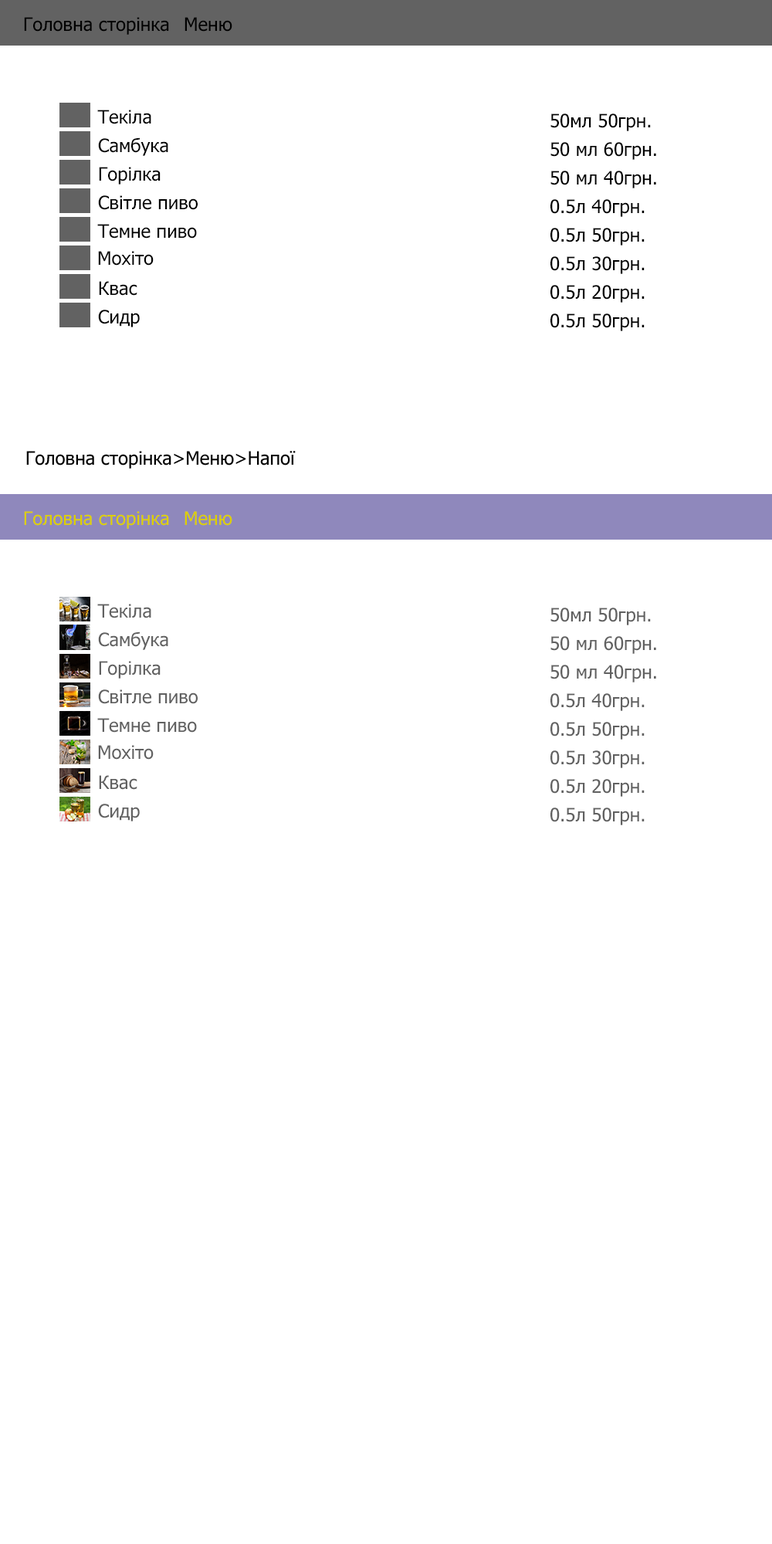
<style>
.page{position:relative;width:772px;height:1544px;background:#ffffff}
.page>*{position:absolute;margin:0}
.t1{font:18.5px "Tahoma";color:#000000}
.t2{font:18.5px "Tahoma";color:#ddcf00}
.t3{font:18.5px "Tahoma";color:#616161}
</style>
<div class="page">
<p class="t1" style="left:24px;top:17px;width:145px;height:18px">Головна сторінка</p>
<p class="t1" style="left:185px;top:17px;width:47px;height:15px">Меню</p>
<p class="t1" style="left:97px;top:110px;width:54px;height:14px">Текіла</p>
<p class="t1" style="left:551px;top:114px;width:100px;height:17px">50мл 50грн.</p>
<p class="t1" style="left:98px;top:137px;width:70px;height:19px">Самбука</p>
<p class="t1" style="left:551px;top:142px;width:105px;height:18px">50 мл 60грн.</p>
<p class="t1" style="left:99px;top:167px;width:62px;height:18px">Горілка</p>
<p class="t1" style="left:551px;top:171px;width:105px;height:17px">50 мл 40грн.</p>
<p class="t1" style="left:98px;top:195px;width:100px;height:15px">Світле пиво</p>
<p class="t1" style="left:551px;top:199px;width:94px;height:18px">0.5л 40грн.</p>
<p class="t1" style="left:97px;top:224px;width:100px;height:15px">Темне пиво</p>
<p class="t1" style="left:551px;top:228px;width:94px;height:18px">0.5л 50грн.</p>
<p class="t1" style="left:98px;top:251px;width:56px;height:15px">Мохіто</p>
<p class="t1" style="left:551px;top:256px;width:94px;height:18px">0.5л 30грн.</p>
<p class="t1" style="left:99px;top:281px;width:38px;height:15px">Квас</p>
<p class="t1" style="left:551px;top:285px;width:94px;height:18px">0.5л 20грн.</p>
<p class="t1" style="left:98px;top:310px;width:42px;height:17px">Сидр</p>
<p class="t1" style="left:551px;top:313px;width:94px;height:18px">0.5л 50грн.</p>
<p class="t2" style="left:24px;top:511px;width:145px;height:18px">Головна сторінка</p>
<p class="t2" style="left:185px;top:511px;width:47px;height:15px">Меню</p>
<p class="t3" style="left:97px;top:604px;width:54px;height:14px">Текіла</p>
<p class="t3" style="left:551px;top:608px;width:100px;height:17px">50мл 50грн.</p>
<p class="t3" style="left:98px;top:632px;width:70px;height:18px">Самбука</p>
<p class="t3" style="left:551px;top:636px;width:105px;height:18px">50 мл 60грн.</p>
<p class="t3" style="left:99px;top:661px;width:62px;height:18px">Горілка</p>
<p class="t3" style="left:551px;top:665px;width:105px;height:18px">50 мл 40грн.</p>
<p class="t3" style="left:98px;top:690px;width:100px;height:14px">Світле пиво</p>
<p class="t3" style="left:551px;top:693px;width:94px;height:18px">0.5л 40грн.</p>
<p class="t3" style="left:97px;top:718px;width:100px;height:15px">Темне пиво</p>
<p class="t3" style="left:551px;top:722px;width:94px;height:18px">0.5л 50грн.</p>
<p class="t3" style="left:98px;top:745px;width:56px;height:15px">Мохіто</p>
<p class="t3" style="left:551px;top:751px;width:94px;height:17px">0.5л 30грн.</p>
<p class="t3" style="left:99px;top:775px;width:38px;height:15px">Квас</p>
<p class="t3" style="left:551px;top:779px;width:94px;height:18px">0.5л 20грн.</p>
<p class="t3" style="left:98px;top:804px;width:42px;height:18px">Сидр</p>
<p class="t3" style="left:551px;top:808px;width:94px;height:17px">0.5л 50грн.</p>
</div>
